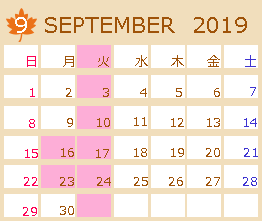
<style>
.page{position:relative;width:262px;height:221px;background:#f1debc}
.page>*{position:absolute;margin:0}
.t1{font:22px "Meiryo";color:#ffffff}
.t2{font:22px "Meiryo";color:#9f5309}
.t3{font:13px "Meiryo";color:#ff0054}
.t4{font:13px "Meiryo";color:#9f5309}
.t5{font:13px "Meiryo";color:#3e33d1}
</style>
<div class="page">
<p class="t1" style="left:15px;top:17px;width:12px;height:16px">9</p>
<p class="t2" style="left:45px;top:17px;width:130px;height:16px">SEPTEMBER</p>
<p class="t2" style="left:194px;top:17px;width:53px;height:16px">2019</p>
<p class="t3" style="left:27px;top:56px;width:9px;height:11px">日</p>
<p class="t4" style="left:63px;top:56px;width:11px;height:11px">月</p>
<p class="t4" style="left:98px;top:56px;width:11px;height:11px">火</p>
<p class="t4" style="left:135px;top:55px;width:13px;height:12px">水</p>
<p class="t4" style="left:171px;top:55px;width:13px;height:12px">木</p>
<p class="t4" style="left:207px;top:55px;width:13px;height:12px">金</p>
<p class="t5" style="left:245px;top:55px;width:11px;height:12px">土</p>
<p class="t3" style="left:30px;top:88px;width:5px;height:9px">1</p>
<p class="t4" style="left:66px;top:88px;width:6px;height:9px">2</p>
<p class="t4" style="left:103px;top:88px;width:6px;height:9px">3</p>
<p class="t4" style="left:140px;top:88px;width:7px;height:9px">4</p>
<p class="t4" style="left:176px;top:88px;width:6px;height:9px">5</p>
<p class="t4" style="left:214px;top:88px;width:6px;height:9px">6</p>
<p class="t5" style="left:250px;top:87px;width:6px;height:9px">7</p>
<p class="t3" style="left:29px;top:119px;width:6px;height:9px">8</p>
<p class="t4" style="left:67px;top:118px;width:6px;height:9px">9</p>
<p class="t4" style="left:97px;top:118px;width:13px;height:9px">10</p>
<p class="t4" style="left:134px;top:117px;width:13px;height:9px">11</p>
<p class="t4" style="left:171px;top:118px;width:13px;height:9px">12</p>
<p class="t4" style="left:207px;top:118px;width:13px;height:9px">13</p>
<p class="t5" style="left:244px;top:118px;width:13px;height:9px">14</p>
<p class="t3" style="left:25px;top:149px;width:13px;height:9px">15</p>
<p class="t4" style="left:61px;top:148px;width:13px;height:9px">16</p>
<p class="t4" style="left:96px;top:149px;width:13px;height:9px">17</p>
<p class="t4" style="left:134px;top:148px;width:13px;height:9px">18</p>
<p class="t4" style="left:171px;top:148px;width:13px;height:9px">19</p>
<p class="t4" style="left:206px;top:148px;width:14px;height:9px">20</p>
<p class="t5" style="left:244px;top:148px;width:14px;height:9px">21</p>
<p class="t3" style="left:24px;top:177px;width:14px;height:9px">22</p>
<p class="t4" style="left:60px;top:177px;width:14px;height:9px">23</p>
<p class="t4" style="left:97px;top:177px;width:14px;height:9px">24</p>
<p class="t4" style="left:134px;top:177px;width:14px;height:9px">25</p>
<p class="t4" style="left:169px;top:177px;width:14px;height:9px">26</p>
<p class="t4" style="left:206px;top:177px;width:14px;height:9px">27</p>
<p class="t5" style="left:243px;top:177px;width:14px;height:9px">28</p>
<p class="t3" style="left:23px;top:207px;width:14px;height:9px">29</p>
<p class="t4" style="left:60px;top:206px;width:14px;height:9px">30</p>
</div>
